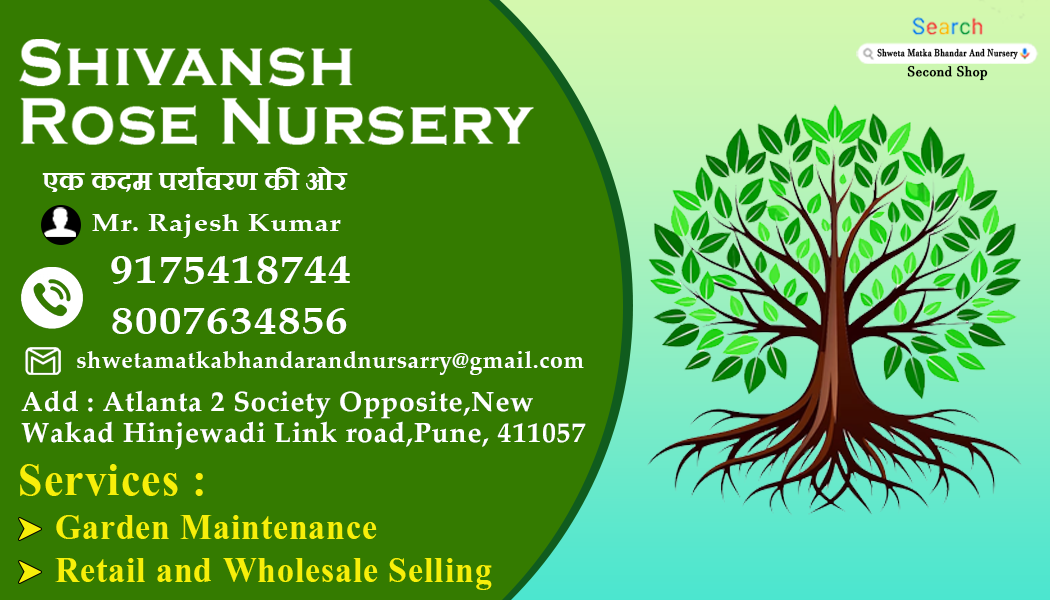
<style>
.page{position:relative;width:1050px;height:600px;background:#347b00}
.page>*{position:absolute;margin:0}
.t1{font:67.4px/59px "CopperplateGothic-Bold";letter-spacing:0.025em;color:#ffffff;scale:0.95 1}
.t2{font:9.8px "JavaneseText";letter-spacing:0.025em;color:#000000;font-weight:bold;scale:0.82 1}
.t3{font:13.8px "JavaneseText";letter-spacing:0.025em;color:#000000;font-weight:bold;scale:0.95 1}
.t4{font:31.7px "Aparajita-Bold";letter-spacing:0.025em;color:#ffffff;scale:0.95 1}
.t5{font:23.9px "PalatinoLinotype-Bold";letter-spacing:0.025em;color:#ffffff;scale:1.19 1}
.t6{font:38.9px "PalatinoLinotype-Bold";letter-spacing:0.025em;color:#ffffff;scale:1.19 1}
.t7{font:38.2px "PalatinoLinotype-Bold";letter-spacing:0.025em;color:#ffffff;scale:1.19 1}
.t8{font:24.4px "PalatinoLinotype-Bold";letter-spacing:0.025em;color:#ffffff;scale:0.95 1}
.t9{font:27.8px/31.2px "PalatinoLinotype-Bold";letter-spacing:0.025em;color:#ffffff}
.t10{font:56.3px "Aparajita-Bold";letter-spacing:0.025em;color:#f7ef0a;scale:0.95 1}
.t11{font:43.8px "Aparajita-Bold";letter-spacing:0.025em;color:#f7ef0a;scale:0.95 1}
</style>
<div class="page">
<p class="t1" style="left:19px;top:39px;width:515px;height:106px">Shivansh <br>Rose Nursery</p>
<p class="t2" style="left:877px;top:48px;width:141px;height:12px">Shweta Matka Bhandar And Nursery</p>
<p class="t3" style="left:907px;top:65px;width:81px;height:16px">Second Shop</p>
<p class="t4" style="left:42px;top:167px;width:306px;height:25px">एक कदम पर्यावरण की ओर</p>
<p class="t5" style="left:92px;top:214px;width:249px;height:24px">Mr. Rajesh Kumar</p>
<p class="t6" style="left:111px;top:256px;width:239px;height:28px">9175418744</p>
<p class="t7" style="left:112px;top:308px;width:235px;height:26px">8007634856</p>
<p class="t8" style="left:77px;top:351px;width:507px;height:24px">shwetamatkabhandarandnursarry@gmail.com</p>
<p class="t9" style="left:21px;top:390px;width:565px;height:60px">Add : Atlanta 2 Society Opposite,New<br>Wakad Hinjewadi Link road,Pune, 411057</p>
<p class="t10" style="left:20px;top:464px;width:183px;height:32px">Services :</p>
<p class="t11" style="left:56px;top:515px;width:321px;height:24px">Garden Maintenance</p>
<p class="t11" style="left:55px;top:558px;width:437px;height:32px">Retail and Wholesale Selling</p>
</div>
